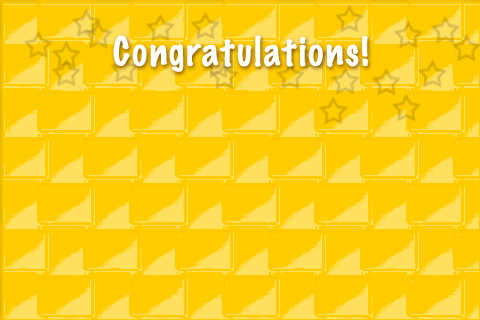
<style>
.page{position:relative;width:480px;height:320px;background:#ffcc00}
.page>*{position:absolute;margin:0}
.t1{font:36px "MarkerFelt-Thin";color:#ffffff;font-weight:bold}
</style>
<div class="page">
<p class="t1" style="left:113px;top:35px;width:255px;height:37px">Congratulations!</p>
</div>
